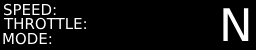
<style>
.page{position:relative;width:256px;height:50px;background:#000000}
.page>*{position:absolute;margin:0}
.t1{font:15px "DejaVuSans";color:#ffffff}
.t2{font:45px "DejaVuSans";color:#ffffff}
</style>
<div class="page">
<p class="t1" style="left:3px;top:3px;width:53px;height:13px">SPEED:</p>
<p class="t1" style="left:3px;top:17px;width:83px;height:13px">THROTTLE:</p>
<p class="t2" style="left:223px;top:8px;width:26px;height:33px">N</p>
<p class="t1" style="left:3px;top:32px;width:49px;height:13px">MODE:</p>
</div>
